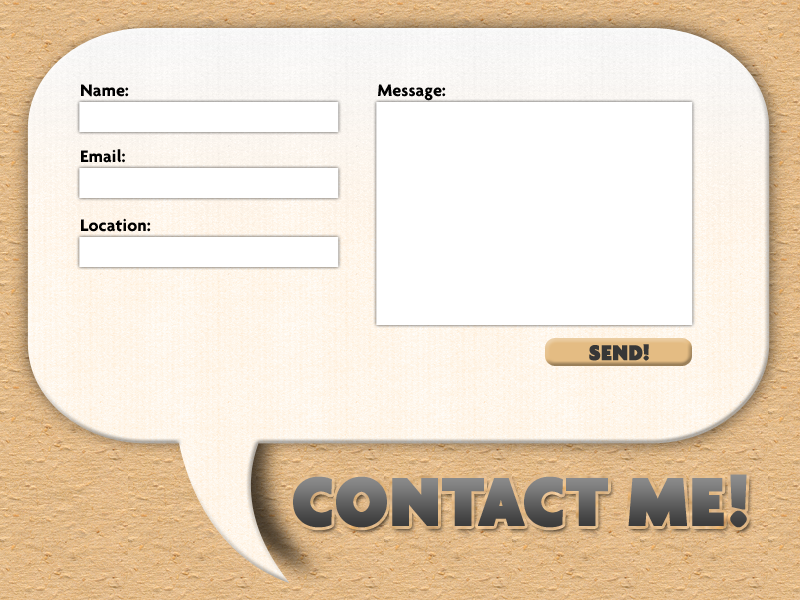
<style>
.page{position:relative;width:800px;height:600px}
.page>*{position:absolute;margin:0}
.t1{font:18px "Agenda-Bold";color:#000000}
.t2{font:23px "Agenda-Black";color:#373737;font-weight:bold;scale:0.95 1}
.t3{font:73.8px "Agenda-Black";color:#727272;font-weight:bold;scale:0.95 1}
</style>
<div class="page">
<p class="t1" style="left:81px;top:84px;width:48px;height:13px">Name:</p>
<p class="t1" style="left:378px;top:84px;width:68px;height:17px">Message:</p>
<p class="t1" style="left:81px;top:149px;width:44px;height:14px">Email:</p>
<p class="t1" style="left:81px;top:218px;width:70px;height:14px">Location:</p>
<p class="t2" style="left:589px;top:344px;width:60px;height:17px">SEND!</p>
<p class="t3" style="left:293px;top:474px;width:454px;height:54px">CONTACT ME!</p>
</div>
